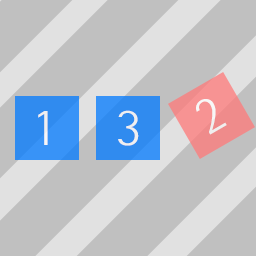
<style>
.page{position:relative;width:256px;height:256px;background:#c0c0c0}
.page>*{position:absolute;margin:0}
.t1{font:48px "SeoulNamsanL";color:#ffffff}
</style>
<div class="page">
<p class="t1" style="left:196px;top:99px;width:31px;height:36px;rotate:-30deg">2</p>
<p class="t1" style="left:38px;top:111px;width:10px;height:34px">1</p>
<p class="t1" style="left:118px;top:110px;width:21px;height:36px">3</p>
</div>
